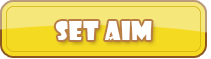
<style>
.page{position:relative;width:211px;height:59px;background:#f6e77b}
.page>*{position:absolute;margin:0}
.t1{font:25px "ShowcardGothic-Reg";letter-spacing:0.025em;color:#ffffff}
</style>
<div class="page">
<p class="t1" style="left:55px;top:21px;width:97px;height:20px">Set Aim</p>
</div>
